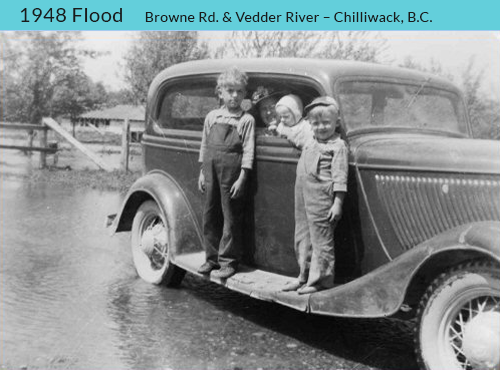
<style>
.page{position:relative;width:500px;height:370px}
.page>*{position:absolute;margin:0}
.t1{font:20px "Lato-Regular";letter-spacing:0.025em;color:#1a1a1a}
.t2{font:14px "Lato-Regular";letter-spacing:0.025em;color:#1a1a1a}
</style>
<div class="page">
<p class="t1" style="left:20px;top:8px;width:102px;height:14px">1948 Flood</p>
<p class="t2" style="left:145px;top:12px;width:287px;height:12px">Browne Rd. &amp; Vedder River – Chilliwack, B.C.</p>
</div>
